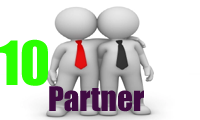
<style>
.page{position:relative;width:200px;height:120px;background:#ffffff}
.page>*{position:absolute;margin:0}
.t1{font:56.2px "Impact";color:#2aff00}
.t2{font:31.2px "Impact";color:#410b43}
</style>
<div class="page">
<p class="t1" style="left:0px;top:39px;width:48px;height:47px">10</p>
<p class="t2" style="left:49px;top:86px;width:95px;height:26px">Partner</p>
</div>
